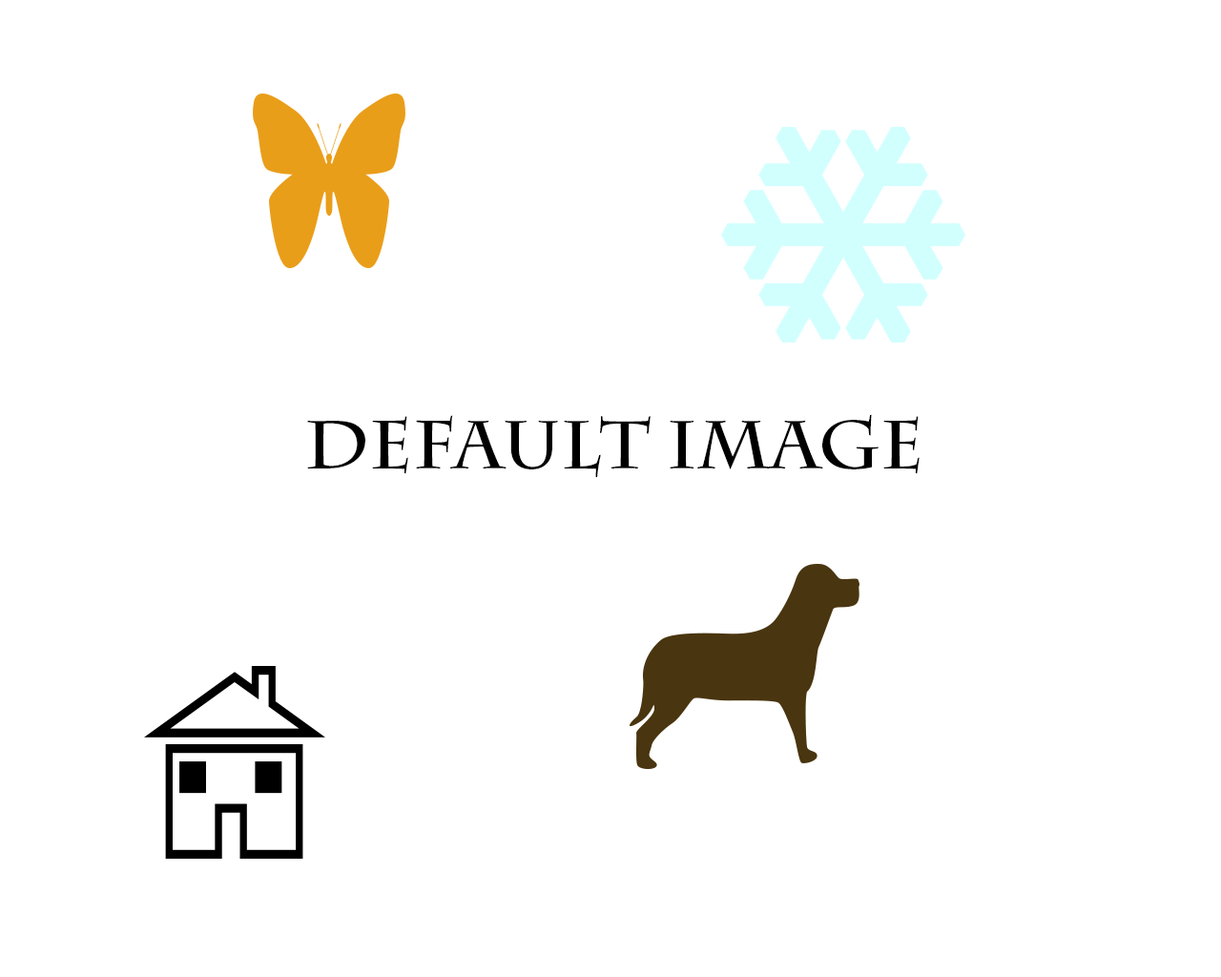
<style>
.page{position:relative;width:1221px;height:977px;background:#ffffff}
.page>*{position:absolute;margin:0}
.t1{font:68.7px "CharlemagneStd-Bold";color:#000000}
</style>
<div class="page">
<p class="t1" style="left:307px;top:414px;width:612px;height:64px">Default Image</p>
</div>
